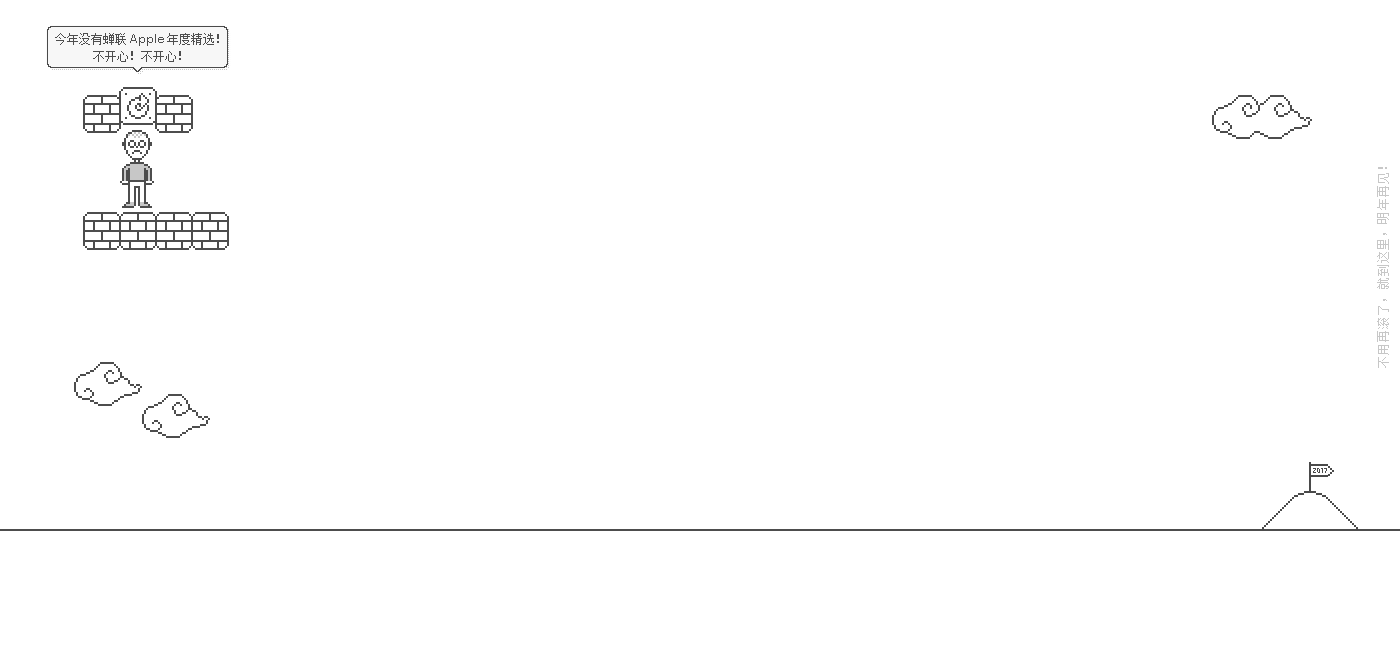
<style>
.page{position:relative;width:1400px;height:652px;background:#ffffff}
.page>*{position:absolute;margin:0}
.t1{font:12px/18px "FZXS12--GB1-0";color:#4d4d4d}
.t2{font:12px/18px "Avenir-Book";color:#4d4d4d}
.t3{font:12px "FZXS12--GB1-0";letter-spacing:0.1em;color:#c7c7c7}
</style>
<div class="page">
<p class="t1" style="left:55px;top:33px;width:164px;height:29px;text-align:center">今年没有蝉联<span class="t2">Apple</span>年度精选！<br>不开心！不开心！</p>
<p class="t3" style="left:1377px;top:167px;width:12px;height:201px;rotate:-90deg">不用再滚了，就到这里，明年再见！</p>
</div>
